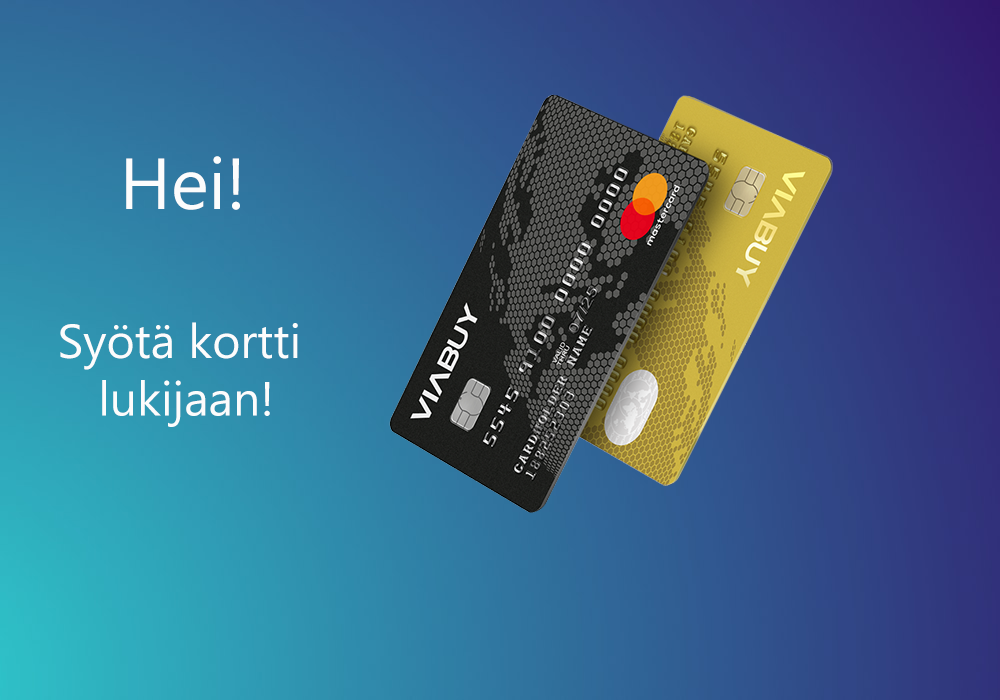
<style>
.page{position:relative;width:1000px;height:700px}
.page>*{position:absolute;margin:0}
.t1{font:72px "Gadugi";color:#fcfcfc}
.t2{font:48px "Gadugi";color:#fcfcfc}
</style>
<div class="page">
<p class="t1" style="left:126px;top:156px;width:114px;height:54px">Hei!</p>
<p class="t2" style="left:60px;top:322px;width:238px;height:105px;text-align:center">Syötä kortti <br>lukijaan!</p>
</div>
